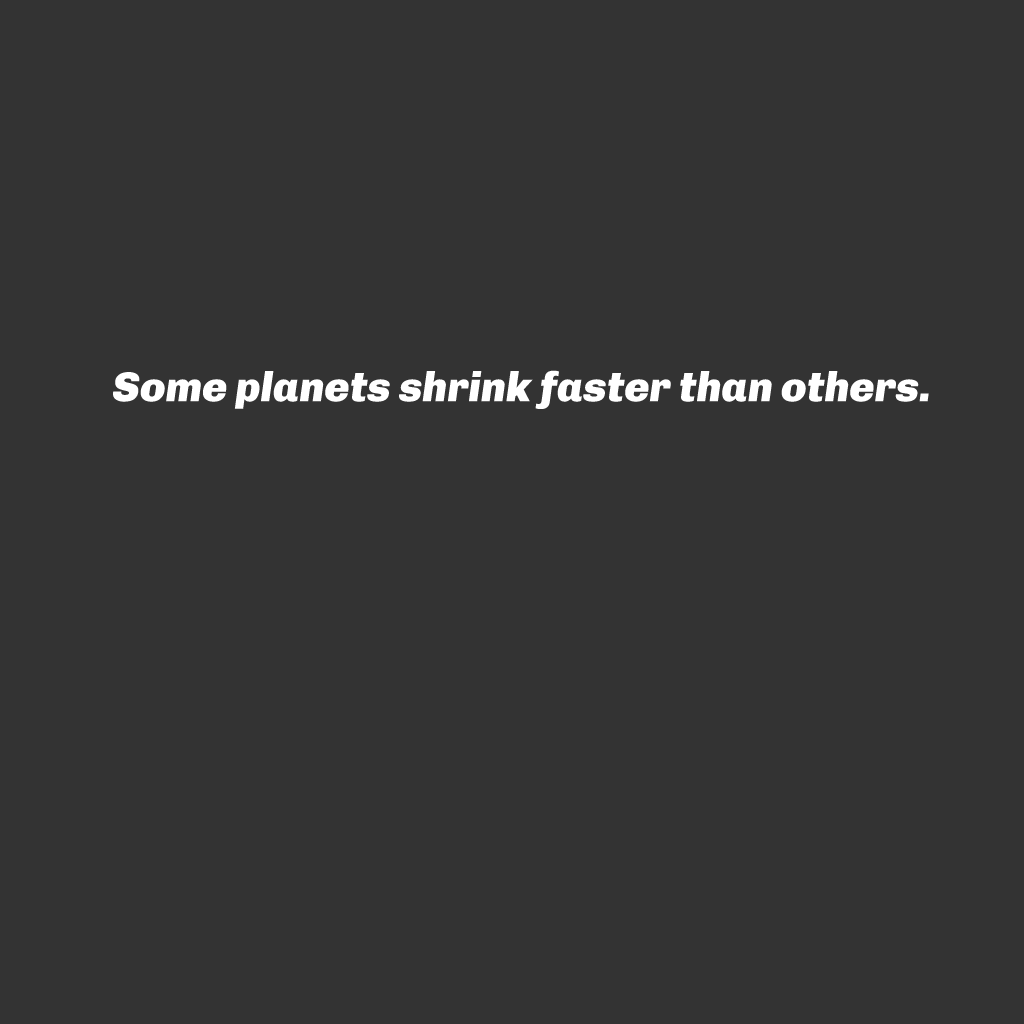
<style>
.page{position:relative;width:1024px;height:1024px;background:#333333}
.page>*{position:absolute;margin:0}
.t1{font:42px "Chivo-BlackItalic";color:#ffffff}
</style>
<div class="page">
<p class="t1" style="left:113px;top:370px;width:816px;height:39px">Some planets shrink faster than others.</p>
</div>
